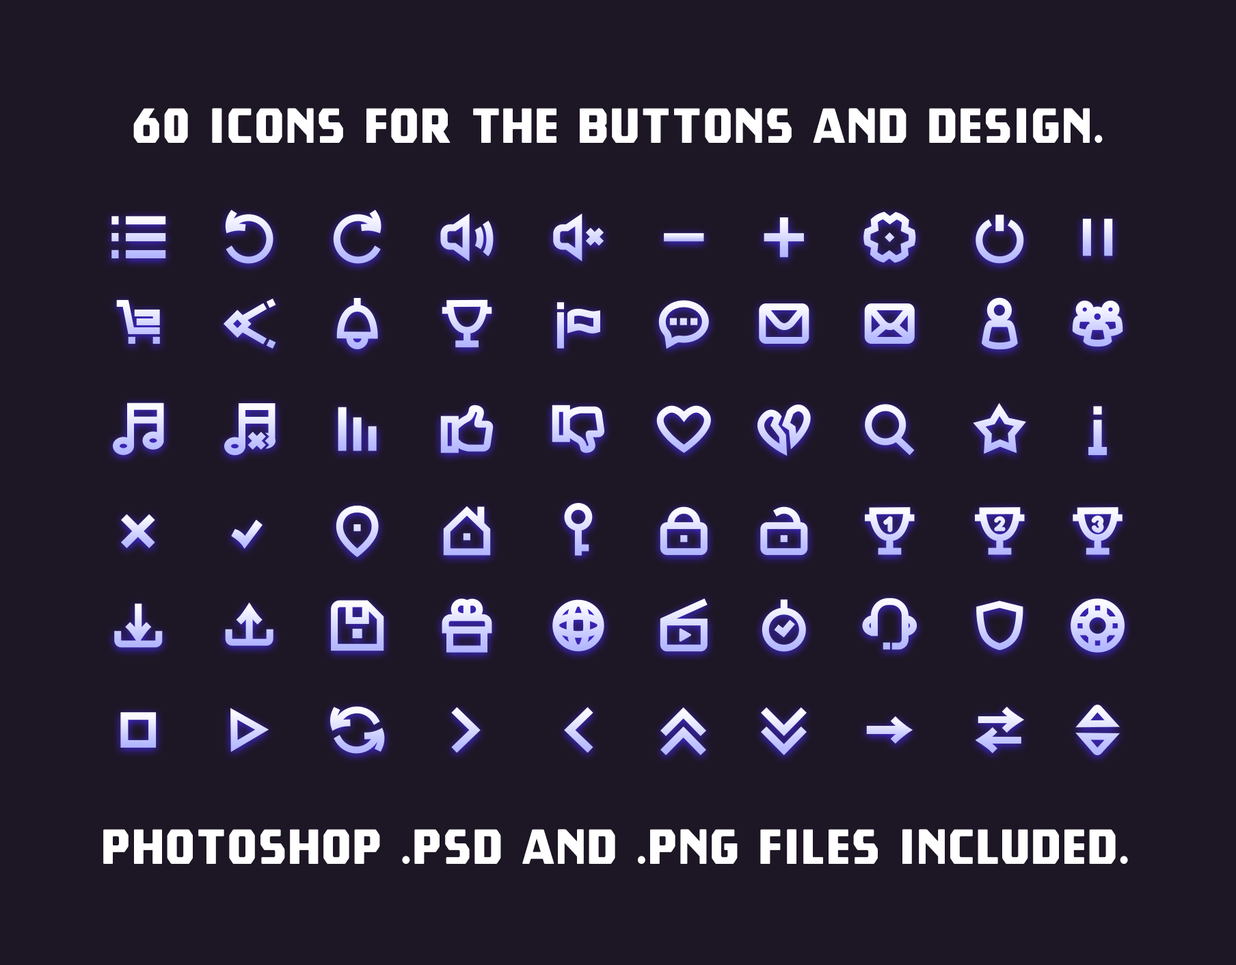
<style>
.page{position:relative;width:1236px;height:965px;background:#1d1625}
.page>*{position:absolute;margin:0}
.t1{font:49.2px "TradesmithRound";letter-spacing:0.05em;color:#ffffff}
</style>
<div class="page">
<p class="t1" style="left:133px;top:108px;width:969px;height:35px">60 icons for the buttons and design.</p>
<p class="t1" style="left:103px;top:829px;width:1025px;height:35px">photoshop .psd and .png files included.</p>
</div>
